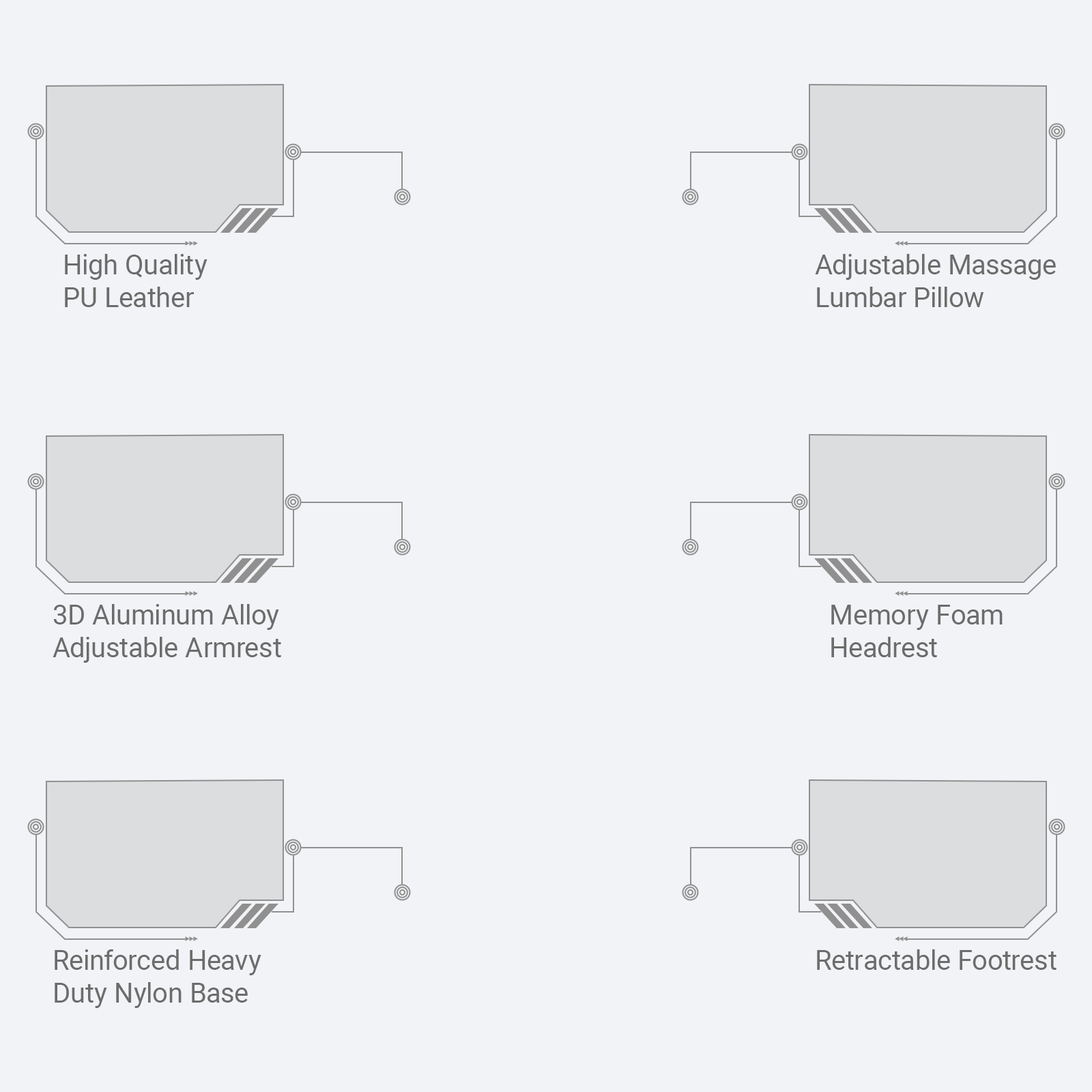
<style>
.page{position:relative;width:1092px;height:1092px;background:#f2f3f6}
.page>*{position:absolute;margin:0}
.t1{font:27.3px "Roboto-Regular";color:#6c6c6c}
</style>
<div class="page">
<p class="t1" style="left:65px;top:254px;width:142px;height:53px">High Quality<br>PU Leather</p>
<p class="t1" style="left:815px;top:254px;width:241px;height:53px">Adjustable Massage<br>Lumbar Pillow</p>
<p class="t1" style="left:53px;top:604px;width:228px;height:59px">3D Aluminum Alloy<br>Adjustable Armrest</p>
<p class="t1" style="left:831px;top:605px;width:172px;height:52px">Memory Foam<br>Headrest</p>
<p class="t1" style="left:55px;top:949px;width:206px;height:59px">Reinforced Heavy<br>Duty Nylon Base</p>
<p class="t1" style="left:817px;top:949px;width:239px;height:21px">Retractable Footrest</p>
</div>
